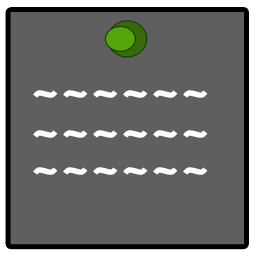
<style>
.page{position:relative;width:256px;height:256px;background:#605f5f}
.page>*{position:absolute;margin:0}
.t1{font:48px "ShowcardGothic-Reg";color:#ffffff}
</style>
<div class="page">
<p class="t1" style="left:33px;top:90px;width:175px;height:8px">~~~~~~</p>
<p class="t1" style="left:33px;top:130px;width:175px;height:8px">~~~~~~</p>
<p class="t1" style="left:33px;top:167px;width:175px;height:8px">~~~~~~</p>
</div>
